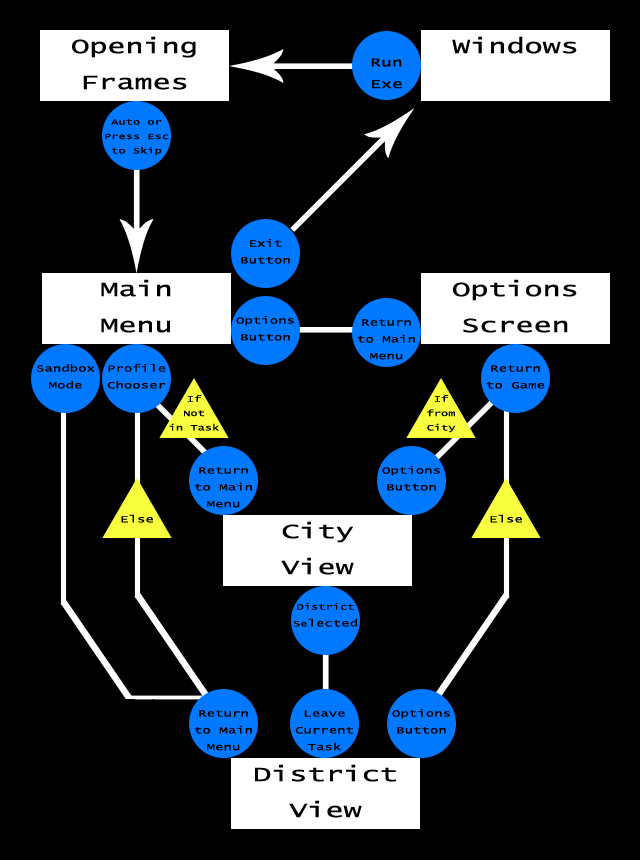
<style>
.page{position:relative;width:640px;height:860px;background:#000000}
.page>*{position:absolute;margin:0}
.t1{font:21px "LucidaConsole";color:#000000;scale:1.43 1}
.t2{font:12.6px "LucidaConsole";color:#000000;scale:1.43 1}
.t3{font:8.4px "LucidaConsole";color:#000000;scale:1.43 1}
.t4{font:9.8px "LucidaConsole";color:#000000;scale:1.43 1}
</style>
<div class="page">
<p class="t1" style="left:72px;top:36px;width:124px;height:54px;text-align:center">Opening Frames</p>
<p class="t1" style="left:452px;top:36px;width:125px;height:18px">Windows</p>
<p class="t2" style="left:371px;top:58px;width:31px;height:31px;text-align:center">Run Exe</p>
<p class="t3" style="left:105px;top:119px;width:64px;height:37px;text-align:center">Auto or Press Esc to Skip</p>
<p class="t4" style="left:241px;top:239px;width:49px;height:25px;text-align:center">Exit Button</p>
<p class="t1" style="left:101px;top:279px;width:70px;height:54px;text-align:center">Main<br>Menu</p>
<p class="t1" style="left:453px;top:279px;width:124px;height:54px;text-align:center">Options Screen</p>
<p class="t4" style="left:236px;top:316px;width:58px;height:25px;text-align:center">Options Button</p>
<p class="t4" style="left:357px;top:319px;width:58px;height:41px;text-align:center">Return to Main Menu</p>
<p class="t4" style="left:37px;top:364px;width:58px;height:25px;text-align:center">Sandbox Mode</p>
<p class="t4" style="left:107px;top:363px;width:59px;height:26px;text-align:center">Profile Chooser</p>
<p class="t4" style="left:486px;top:365px;width:59px;height:24px;text-align:center">Return to Game</p>
<p class="t3" style="left:169px;top:395px;width:51px;height:36px;text-align:center">If Not in Task</p>
<p class="t3" style="left:427px;top:395px;width:29px;height:38px;text-align:center">If from City</p>
<p class="t4" style="left:194px;top:467px;width:58px;height:41px;text-align:center">Return to Main Menu</p>
<p class="t4" style="left:382px;top:466px;width:58px;height:25px;text-align:center">Options Button</p>
<p class="t4" style="left:121px;top:514px;width:32px;height:9px">Else</p>
<p class="t1" style="left:281px;top:521px;width:73px;height:54px;text-align:center">City<br>View</p>
<p class="t4" style="left:490px;top:514px;width:32px;height:9px">Else</p>
<p class="t3" style="left:293px;top:603px;width:64px;height:24px;text-align:center">District Se<span class="t4">lected</span></p>
<p class="t4" style="left:194px;top:710px;width:58px;height:41px;text-align:center">Return to Main Menu</p>
<p class="t4" style="left:295px;top:710px;width:59px;height:41px;text-align:center">Leave Current Task</p>
<p class="t4" style="left:392px;top:709px;width:58px;height:25px;text-align:center">Options Button</p>
<p class="t1" style="left:255px;top:764px;width:141px;height:54px;text-align:center">District View</p>
</div>
